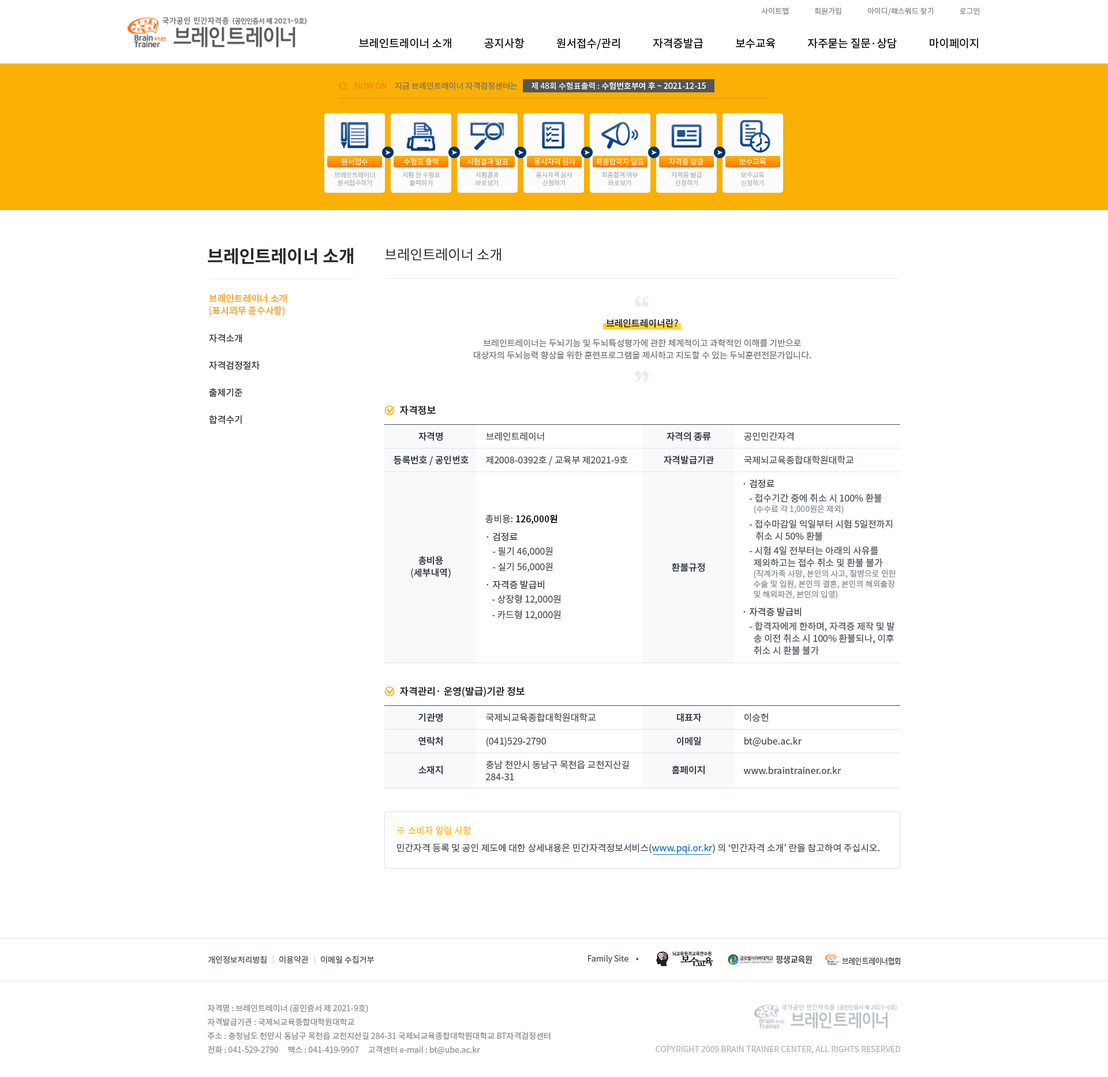
<style>
.page{position:relative;width:1108px;height:1077px;background:#ffffff}
.page>*{position:absolute;margin:0}
.t1{font:7.5px "NotoSansCJKkr-Regular";letter-spacing:0.001em;color:#868e96}
.t2{font:11px "NotoSansCJKkr-Regular";color:#000000}
.t3{font:8.1px "NotoSansCJKkr-Regular";color:#f08c00}
.t4{font:8.1px "NotoSansCJKkr-Regular";color:#7c6d5d}
.t5{font:8.1px "NotoSansCJKkr-Medium";color:#f8f8f8}
.t6{font:8.1px "NotoSansCJKkr-Regular";color:#f8f8f8}
.t7{font:7.5px "NotoSansCJKkr-Light";letter-spacing:-0.025em;color:#fcfcfc}
.t8{font:6.3px/8.1px "NotoSansCJKkr-Regular";color:#adb5bd}
.t9{font:17.3px "NotoSansCJKkr-Bold";color:#2b2b2b}
.t10{font:13.8px "NotoSansCJKkr-Regular";color:#2b2b2b}
.t11{font:9.2px/12.1px "NotoSansCJKkr-Medium";color:#fd9f27}
.t12{font:9.2px "NotoSansCJKkr-Medium";color:#2b2b2b}
.t13{font:9.2px "NotoSansCJKkr-Regular";color:#2b2b2b}
.t14{font:8.7px/12.1px "NotoSansCJKkr-Regular";color:#737373}
.t15{font:9.8px "NotoSansCJKkr-Medium";color:#212529}
.t16{font:9.2px "NotoSansCJKkr-Medium";color:#343a40}
.t17{font:9.2px "NotoSansCJKkr-Regular";color:#495057}
.t18{font:9.2px "NotoSansCJKkr-Regular";color:#343a40}
.t19{font:8.1px "NotoSansCJKkr-Regular";color:#868e96}
.t20{font:9.2px "NotoSansCJKkr-Regular";color:#868e96}
.t21{font:9.2px "NotoSansCJKkr-Medium";color:#000000}
.t22{font:9.2px/12.1px "NotoSansCJKkr-Regular";color:#495057}
.t23{font:9.2px/12.1px "NotoSansCJKkr-Medium";color:#343a40}
.t24{font:8.1px/10.4px "NotoSansCJKkr-Regular";color:#868e96}
.t25{font:9.2px "NotoSansCJKkr-Regular";color:#fab30c}
.t26{font:9.2px "NotoSansCJKkr-Regular";color:#1f72c6}
.t27{font:8.1px "NotoSansCJKkr-Regular";color:#495057}
.t28{font:8.1px "NotoSansCJKkr-Regular";color:#ced4da}
.t29{font:8.1px/13.8px "NotoSansCJKkr-Regular";color:#868e96}
.t30{font:8.1px "NotoSansCJKkr-Regular";color:#adb5bd}
</style>
<div class="page">
<p class="t1" style="left:761px;top:7px;width:219px;height:9px">사이트맵               회원가입               아이디/패스워드 찾기               로그인</p>
<p class="t2" style="left:359px;top:37px;width:619px;height:13px">브레인트레이너 소개             공지사항             원서접수/관리             자격증발급             보수교육             자주묻는 질문·상담             마이페이지</p>
<p class="t3" style="left:355px;top:82px;width:32px;height:7px">NOW ON</p>
<p class="t4" style="left:395px;top:82px;width:122px;height:8px">지금 브레인트레이너 자격검정센터는</p>
<p class="t5" style="left:531px;top:82px;width:175px;height:8px"><span class="t6">제 48회 수험표출력 : </span>수험번호부여 후 ~ 2021-12-15</p>
<p class="t7" style="left:341px;top:158px;width:27px;height:8px">원서접수</p>
<p class="t7" style="left:404px;top:157px;width:34px;height:9px">수험표 출력</p>
<p class="t7" style="left:467px;top:157px;width:41px;height:8px">시험결과 발표</p>
<p class="t7" style="left:534px;top:157px;width:42px;height:9px">응시자격 심사</p>
<p class="t7" style="left:595px;top:157px;width:49px;height:9px">최종합격자 발표</p>
<p class="t7" style="left:669px;top:157px;width:34px;height:9px">자격증 발급</p>
<p class="t7" style="left:738px;top:158px;width:28px;height:8px">보수교육</p>
<p class="t8" style="left:335px;top:171px;width:40px;height:15px;text-align:center">브레인트레이너<br>원서접수하기</p>
<p class="t8" style="left:402px;top:171px;width:38px;height:15px;text-align:center">시험 전 수험표<br>출력하기</p>
<p class="t8" style="left:475px;top:171px;width:23px;height:15px;text-align:center">시험결과<br>바로보기</p>
<p class="t8" style="left:536px;top:171px;width:36px;height:15px;text-align:center">응시자격 심사<br>신청하기</p>
<p class="t8" style="left:602px;top:171px;width:36px;height:15px;text-align:center">최종합격 여부<br>바로보기</p>
<p class="t8" style="left:671px;top:171px;width:31px;height:15px;text-align:center">자격증 발급<br>신청하기</p>
<p class="t8" style="left:741px;top:171px;width:23px;height:15px;text-align:center">보수교육<br>신청하기</p>
<p class="t9" style="left:208px;top:247px;width:145px;height:17px">브레인트레이너 소개</p>
<p class="t10" style="left:385px;top:248px;width:116px;height:13px">브레인트레이너 소개</p>
<p class="t11" style="left:209px;top:294px;width:78px;height:22px">브레인트레이너 소개<br>(표시의무 준수사항)</p>
<p class="t12" style="left:606px;top:318px;width:72px;height:10px">브레인트레이너란?</p>
<p class="t13" style="left:209px;top:333px;width:33px;height:10px">자격소개</p>
<p class="t14" style="left:474px;top:339px;width:337px;height:20px;text-align:center">브레인트레이너는 두뇌기능 및 두뇌특성평가에 관한 체계적이고 과학적인 이해를 기반으로<br>대상자의 두뇌능력 향상을 위한 훈련프로그램을 제시하고 지도할 수 있는 두뇌훈련전문가입니다.</p>
<p class="t13" style="left:209px;top:361px;width:51px;height:9px">자격검정절차</p>
<p class="t13" style="left:209px;top:388px;width:33px;height:9px">출제기준</p>
<p class="t15" style="left:400px;top:405px;width:36px;height:10px">자격정보</p>
<p class="t13" style="left:209px;top:415px;width:33px;height:9px">합격수기</p>
<p class="t16" style="left:418px;top:432px;width:24px;height:9px">자격명</p>
<p class="t17" style="left:486px;top:432px;width:58px;height:9px">브레인트레이너</p>
<p class="t16" style="left:666px;top:432px;width:45px;height:9px">자격의 종류</p>
<p class="t17" style="left:744px;top:432px;width:49px;height:9px">공인민간자격</p>
<p class="t16" style="left:393px;top:455px;width:75px;height:10px">등록번호 / 공인번호</p>
<p class="t17" style="left:486px;top:455px;width:142px;height:10px">제2008-0392호 / 교육부 제2021-9호</p>
<p class="t16" style="left:663px;top:455px;width:51px;height:9px">자격발급기관</p>
<p class="t17" style="left:744px;top:455px;width:109px;height:9px">국제뇌교육종합대학원대학교</p>
<p class="t18" style="left:743px;top:479px;width:31px;height:9px">· 검정료</p>
<p class="t17" style="left:749px;top:493px;width:133px;height:9px">- 접수기간 중에 취소 시 100% 환불</p>
<p class="t19" style="left:754px;top:505px;width:89px;height:8px"><span class="t20">  </span>(수수료 각 1,000원은 제외)</p>
<p class="t21" style="left:485px;top:514px;width:72px;height:10px"><span class="t17">총비용: </span>126,000원</p>
<p class="t22" style="left:749px;top:519px;width:143px;height:22px">- 접수마감일 익일부터 시험 5일전까지<br>   취소 시 50% 환불</p>
<p class="t18" style="left:486px;top:532px;width:31px;height:9px">· 검정료</p>
<p class="t22" style="left:749px;top:546px;width:134px;height:21px">- 시험 4일 전부터는 아래의 사유를<br>  제외하고는 접수 취소 및 환불 불가</p>
<p class="t23" style="left:411px;top:556px;width:40px;height:22px;text-align:center">총비용<br>(세부내역)</p>
<p class="t17" style="left:493px;top:546px;width:60px;height:10px">- 필기 46,000원</p>
<p class="t17" style="left:493px;top:562px;width:60px;height:10px">- 실기 56,000원</p>
<p class="t16" style="left:672px;top:562px;width:32px;height:10px">환불규정</p>
<p class="t24" style="left:753px;top:569px;width:143px;height:30px">(직계가족 사망, 본인의 사고, 질병으로 인한<br>수술 및 입원, 본인의 결혼, 본인의 해외출장<br>및 해외파견, 본인의 입영)</p>
<p class="t18" style="left:486px;top:580px;width:58px;height:9px">· 자격증 발급비</p>
<p class="t17" style="left:492px;top:594px;width:69px;height:10px">- 상장형 12,000원</p>
<p class="t17" style="left:492px;top:610px;width:69px;height:10px">- 카드형 12,000원</p>
<p class="t18" style="left:743px;top:607px;width:58px;height:9px">· 자격증 발급비</p>
<p class="t22" style="left:749px;top:621px;width:146px;height:34px">- 합격자에게 한하며, 자격증 제작 및 발<br>  송 이전 취소 시 100% 환불되나, 이후<br>  취소 시 환불 불가</p>
<p class="t15" style="left:400px;top:686px;width:124px;height:11px">자격관리· 운영(발급)기관 정보</p>
<p class="t16" style="left:418px;top:712px;width:24px;height:10px">기관명</p>
<p class="t17" style="left:486px;top:712px;width:109px;height:10px">국제뇌교육종합대학원대학교</p>
<p class="t16" style="left:677px;top:712px;width:25px;height:10px">대표자</p>
<p class="t17" style="left:744px;top:712px;width:24px;height:10px">이승헌</p>
<p class="t16" style="left:418px;top:736px;width:24px;height:9px">연락처</p>
<p class="t17" style="left:486px;top:737px;width:60px;height:10px">(041)529-2790</p>
<p class="t16" style="left:677px;top:736px;width:24px;height:9px">이메일</p>
<p class="t17" style="left:744px;top:737px;width:57px;height:9px">bt@ube.ac.kr</p>
<p class="t22" style="left:486px;top:760px;width:143px;height:20px">충남 천안시 동남구 목천읍 교천지산길<br>284-31</p>
<p class="t16" style="left:418px;top:765px;width:24px;height:9px">소재지</p>
<p class="t16" style="left:672px;top:765px;width:32px;height:9px">홈페이지</p>
<p class="t17" style="left:743px;top:766px;width:98px;height:8px">www.braintrainer.or.kr</p>
<p class="t25" style="left:397px;top:826px;width:74px;height:9px">※ 소비자 알림 사항</p>
<p class="t17" style="left:397px;top:843px;width:482px;height:10px">민간자격 등록 및 공인 제도에 대한 상세내용은 민간자격정보서비스(<span class="t26">www.pqi.or.kr</span>) 의 ‘민간자격 소개’ 란을 참고하여 주십시오.</p>
<p class="t27" style="left:208px;top:955px;width:59px;height:8px">개인정보처리방침</p>
<p class="t27" style="left:208px;top:955px;width:59px;height:8px">개인정보처리방침</p>
<p class="t28" style="left:272px;top:955px;width:1px;height:9px">|</p>
<p class="t28" style="left:272px;top:955px;width:1px;height:9px">|</p>
<p class="t27" style="left:279px;top:955px;width:30px;height:8px">이용약관</p>
<p class="t27" style="left:279px;top:955px;width:30px;height:8px">이용약관</p>
<p class="t28" style="left:314px;top:955px;width:1px;height:9px">|</p>
<p class="t28" style="left:314px;top:955px;width:1px;height:9px">|</p>
<p class="t27" style="left:321px;top:955px;width:53px;height:8px">이메일 수집거부</p>
<p class="t27" style="left:321px;top:955px;width:53px;height:8px">이메일 수집거부</p>
<p class="t27" style="left:588px;top:954px;width:40px;height:9px">Family Site</p>
<p class="t27" style="left:588px;top:954px;width:40px;height:9px">Family Site</p>
<p class="t29" style="left:207px;top:1004px;width:343px;height:50px">자격명 : 브레인트레이너 (공인증서 제 2021-9호)<br>자격발급기관 : 국제뇌교육종합대학원대학교<br>주소 : 충청남도 천안시 동남구 목천읍 교천지산길 284-31 국제뇌교육종합대학원대학교 BT자격검정센터<br>전화 : 041-529-2790     팩스 : 041-419-9907     고객센터 e-mail : bt@ube.ac.kr</p>
<p class="t29" style="left:207px;top:1004px;width:343px;height:50px">자격명 : 브레인트레이너 (공인증서 제 2021-9호)<br>자격발급기관 : 국제뇌교육종합대학원대학교<br>주소 : 충청남도 천안시 동남구 목천읍 교천지산길 284-31 국제뇌교육종합대학원대학교 BT자격검정센터<br>전화 : 041-529-2790     팩스 : 041-419-9907     고객센터 e-mail : bt@ube.ac.kr</p>
<p class="t30" style="left:655px;top:1045px;width:245px;height:8px">COPYRIGHT 2009 BRAIN TRAINER CENTER, ALL RIGHTS RESERVED</p>
<p class="t30" style="left:655px;top:1045px;width:245px;height:8px">COPYRIGHT 2009 BRAIN TRAINER CENTER, ALL RIGHTS RESERVED</p>
</div>
